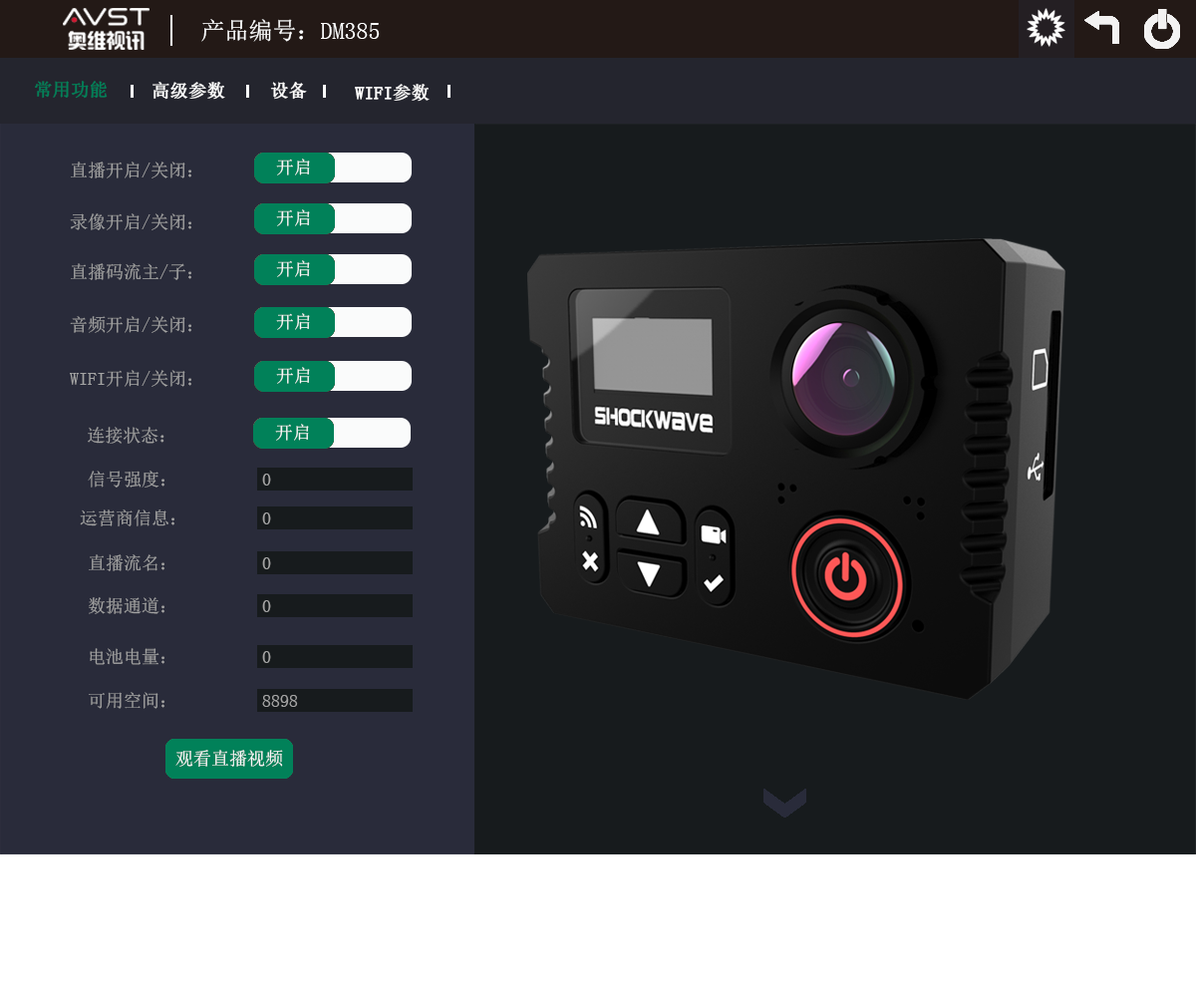
<style>
.page{position:relative;width:1196px;height:997px;background:#171b1d}
.page>*{position:absolute;margin:0}
.t1{font:23.9px "SimSun";color:#ffffff}
.t2{font:17.9px "SimSun";color:#018159;font-weight:bold}
.t3{font:17.9px "SimSun";color:#ffffff;font-weight:bold}
.t4{font:17.9px "SimSun";color:#fffefe;font-weight:bold}
.t5{font:17.9px "SimSun";color:#fefdfd;font-weight:bold}
.t6{font:17.9px "SimSun";color:#a3a3a3}
.t7{font:17.9px "SimSun";color:#fafbfb}
.t8{font:17.9px "SimSun";color:#fcfafa}
</style>
<div class="page">
<p class="t1" style="left:201px;top:19px;width:179px;height:23px">产品编号：DM385</p>
<p class="t2" style="left:35px;top:81px;width:73px;height:18px">常用功能</p>
<p class="t3" style="left:153px;top:82px;width:72px;height:18px">高级参数</p>
<p class="t4" style="left:270px;top:82px;width:37px;height:18px">设备</p>
<p class="t5" style="left:355px;top:84px;width:75px;height:18px">WIFI参数</p>
<p class="t6" style="left:71px;top:161px;width:120px;height:17px">直播开启/关闭：</p>
<p class="t7" style="left:276px;top:158px;width:34px;height:17px">开启</p>
<p class="t7" style="left:276px;top:209px;width:34px;height:17px">开启</p>
<p class="t6" style="left:70px;top:213px;width:121px;height:17px">录像开启/关闭：</p>
<p class="t6" style="left:71px;top:263px;width:120px;height:17px">直播码流主/子：</p>
<p class="t7" style="left:276px;top:260px;width:34px;height:17px">开启</p>
<p class="t6" style="left:70px;top:316px;width:121px;height:17px">音频开启/关闭：</p>
<p class="t7" style="left:276px;top:313px;width:34px;height:17px">开启</p>
<p class="t6" style="left:70px;top:370px;width:121px;height:17px">WIFI开启/关闭：</p>
<p class="t7" style="left:276px;top:367px;width:34px;height:17px">开启</p>
<p class="t7" style="left:275px;top:424px;width:34px;height:17px">开启</p>
<p class="t6" style="left:88px;top:427px;width:76px;height:17px">连接状态：</p>
<p class="t6" style="left:88px;top:471px;width:76px;height:16px">信号强度：</p>
<p class="t6" style="left:262px;top:473px;width:9px;height:12px">0</p>
<p class="t6" style="left:80px;top:509px;width:94px;height:17px">运营商信息：</p>
<p class="t6" style="left:262px;top:512px;width:9px;height:12px">0</p>
<p class="t6" style="left:89px;top:554px;width:75px;height:17px">直播流名：</p>
<p class="t6" style="left:262px;top:557px;width:9px;height:12px">0</p>
<p class="t6" style="left:89px;top:597px;width:75px;height:17px">数据通道：</p>
<p class="t6" style="left:262px;top:600px;width:9px;height:12px">0</p>
<p class="t6" style="left:90px;top:648px;width:74px;height:17px">电池电量：</p>
<p class="t6" style="left:262px;top:651px;width:9px;height:12px">0</p>
<p class="t6" style="left:89px;top:692px;width:75px;height:17px">可用空间：</p>
<p class="t6" style="left:262px;top:695px;width:36px;height:12px">8898</p>
<p class="t8" style="left:175px;top:750px;width:108px;height:17px">观看直播视频</p>
</div>
